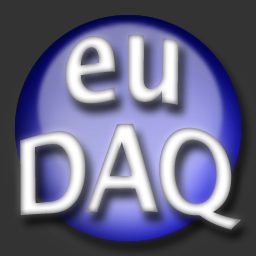
<style>
.page{position:relative;width:256px;height:256px;background:#333333}
.page>*{position:absolute;margin:0}
.t1{font:100px/91.7px "LucidaSans-Demi"}
</style>
<div class="page">
<p class="t1" style="left:20px;top:34px;width:221px;height:196px;text-align:center">eu<br>DAQ</p>
</div>
